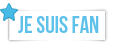
<style>
.page{position:relative;width:115px;height:49px;background:#ffffff}
.page>*{position:absolute;margin:0}
.t1{font:23.5px "BebasNeue";color:#5ec1ea}
</style>
<div class="page">
<p class="t1" style="left:18px;top:16px;width:81px;height:17px">Je suis fan</p>
</div>
